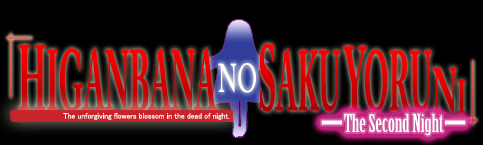
<style>
.page{position:relative;width:483px;height:145px;background:#000000}
.page>*{position:absolute;margin:0}
.t1{font:85.7px "ACaslonPro-Bold";scale:0.35 1}
.t2{font:92.4px "ACaslonPro-Bold";scale:0.35 1}
.t3{font:84.5px "ACaslonPro-Bold";scale:0.34 1}
.t4{font:92.4px "ACaslonPro-Bold";scale:0.34 1}
.t5{font:84.5px "ACaslonPro-Bold";scale:0.35 1}
.t6{font:39.7px "ACaslonPro-Regular";color:#ffffff;scale:0.61 1}
.t7{font:64px "ACaslonPro-Bold";scale:0.47 1}
.t8{font:46px "ACaslonPro-Bold";scale:0.47 1}
.t9{font:8px "MS-PGothic";color:#ffffff;scale:0.95 1}
.t10{font:24px "BirchStd";color:#ffffff}
.t11{font:24px "KozGoPr6N-Heavy";color:#ffffff}
</style>
<div class="page">
<p class="t1" style="left:19px;top:44px;width:199px;height:68px"><span class="t2">H</span>IGANBANA</p>
<p class="t3" style="left:259px;top:43px;width:81px;height:69px"><span class="t4">S</span>AKU</p>
<p class="t2" style="left:343px;top:46px;width:24px;height:67px">Y</p>
<p class="t5" style="left:364px;top:49px;width:68px;height:63px">ORU</p>
<p class="t6" style="left:218px;top:63px;width:38px;height:30px">NO</p>
<p class="t7" style="left:432px;top:67px;width:34px;height:47px">N<span class="t8">I</span></p>
<p class="t9" style="left:63px;top:113px;width:167px;height:7px">The unforgiving flowers blossom in the dead of night.</p>
<p class="t10" style="left:321px;top:113px;width:145px;height:23px"><span class="t11">ー</span>The Second Night<span class="t11">ー</span></p>
</div>
